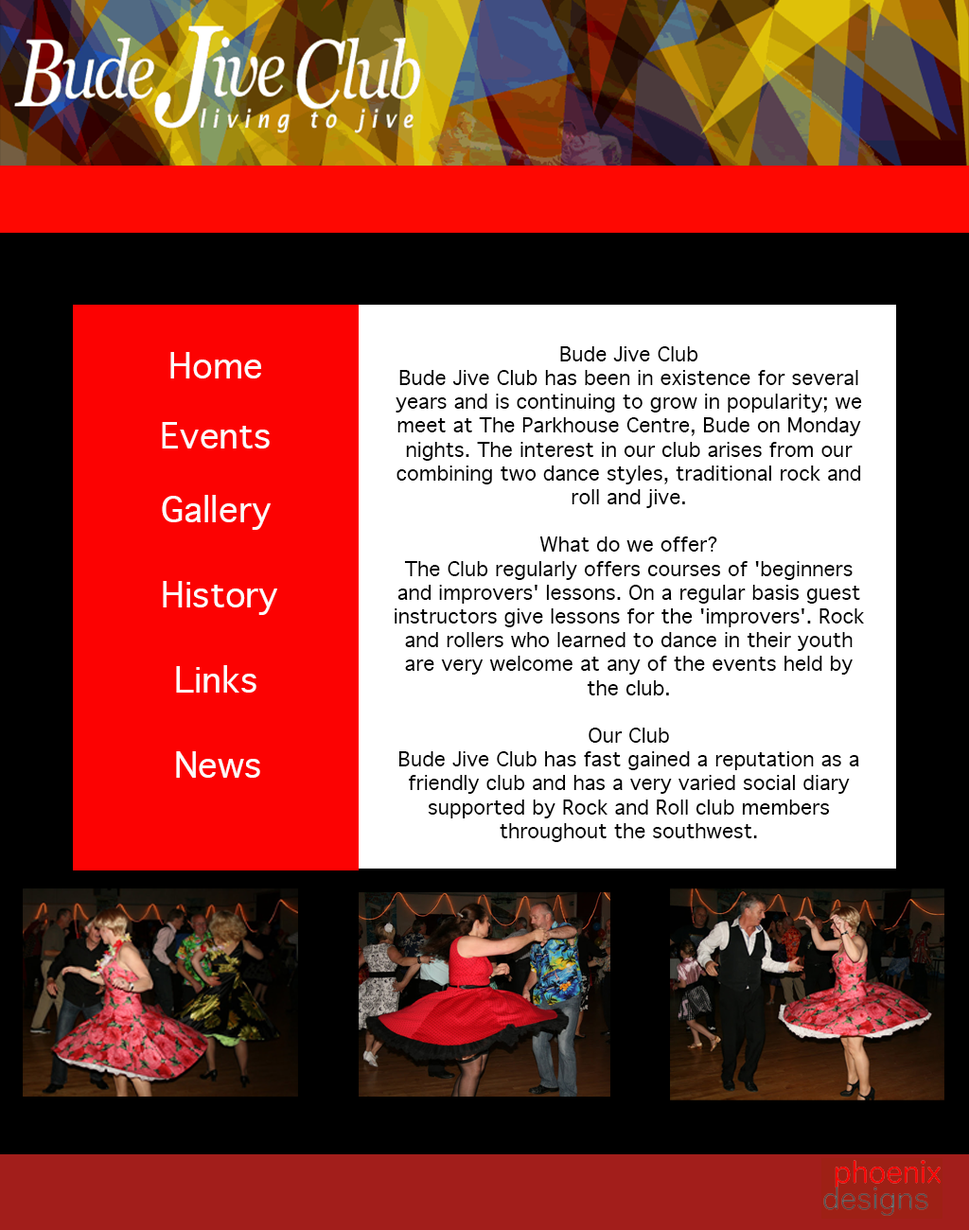
<style>
.page{position:relative;width:969px;height:1230px;background:#000000}
.page>*{position:absolute;margin:0}
.t1{font:34.1px "Geneva";color:#fcfafa}
.t2{font:19.9px "Geneva";color:#000000}
</style>
<div class="page">
<p class="t1" style="left:170px;top:352px;width:91px;height:27px">Home</p>
<p class="t2" style="left:395px;top:346px;width:469px;height:496px;text-align:center">Bude Jive Club<br>Bude Jive Club has been in existence for several years and is continuing to grow in popularity; we meet at The Parkhouse Centre, Bude on Monday nights. The interest in our club arises from our combining two dance styles, traditional rock and roll and jive.<br><br>What do we offer?<br>The Club regularly offers courses of 'beginners and improvers' lessons. On a regular basis guest instructors give lessons for the 'improvers'. Rock and rollers who learned to dance in their youth are very welcome at any of the events held by the club.<br><br>Our Club<br>Bude Jive Club has fast gained a reputation as a friendly club and has a very varied social diary supported by Rock and Roll club members throughout the southwest.</p>
<p class="t1" style="left:162px;top:422px;width:108px;height:27px">Events</p>
<p class="t1" style="left:162px;top:495px;width:109px;height:35px">Gallery</p>
<p class="t1" style="left:163px;top:581px;width:114px;height:34px">History</p>
<p class="t1" style="left:176px;top:665px;width:80px;height:28px">Links</p>
<p class="t1" style="left:176px;top:751px;width:84px;height:27px">News</p>
</div>
